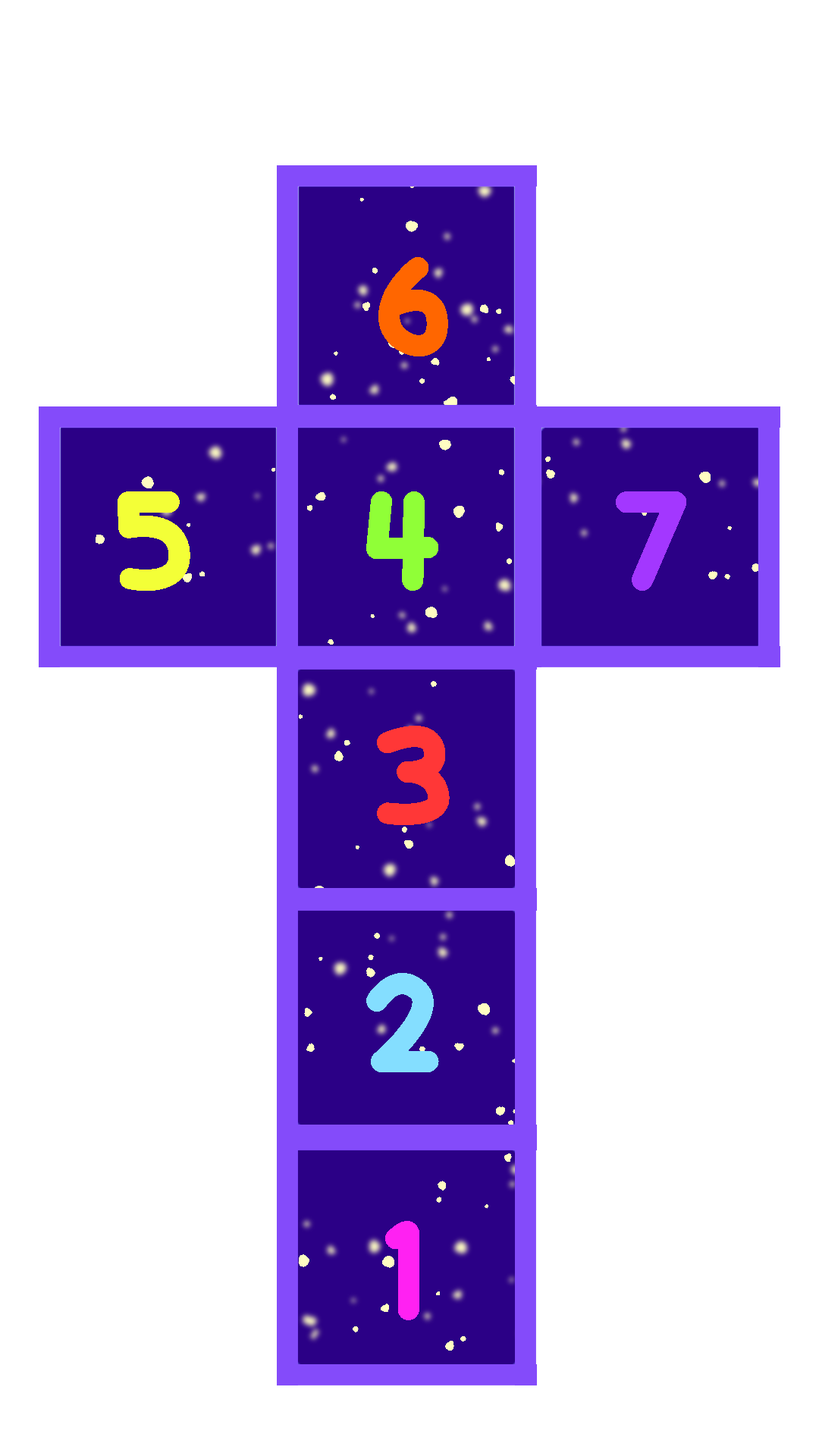
<style>
.page{position:relative;width:819px;height:1456px;background:#ffffff}
.page>*{position:absolute;margin:0}
.t1{font:139.5px "CandyBeans";color:#ff6600}
.t2{font:139.5px "CandyBeans";color:#f3ff37}
.t3{font:139.5px "CandyBeans";color:#90ff37}
.t4{font:139.5px "CandyBeans";color:#a337ff}
.t5{font:139.5px "CandyBeans";color:#ff3737}
.t6{font:139.5px "CandyBeans";color:#84deff}
.t7{font:139.5px "CandyBeans";color:#ff21f2}
</style>
<div class="page">
<p class="t1" style="left:378px;top:257px;width:70px;height:99px">6</p>
<p class="t2" style="left:118px;top:491px;width:72px;height:100px">5</p>
<p class="t3" style="left:366px;top:491px;width:72px;height:100px">4</p>
<p class="t4" style="left:616px;top:491px;width:70px;height:100px">7</p>
<p class="t5" style="left:377px;top:726px;width:73px;height:99px">3</p>
<p class="t6" style="left:366px;top:973px;width:73px;height:99px">2</p>
<p class="t7" style="left:385px;top:1221px;width:34px;height:99px">1</p>
</div>
